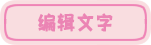
<style>
.page{position:relative;width:151px;height:45px;background:#f9dde0}
.page>*{position:absolute;margin:0}
.t1{font:12px "shetumodengxiaofangti";color:#eb84b4;font-weight:bold;scale:0.94 1}
</style>
<div class="page">
<p class="t1" style="left:38px;top:13px;width:75px;height:19px">编辑文字</p>
</div>
